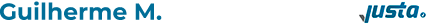
<style>
.page{position:relative;width:429px;height:24px;background:#ffffff}
.page>*{position:absolute;margin:0}
.t1{font:23.3px "Montserrat-Bold";color:#006e98}
</style>
<div class="page">
<p class="t1" style="left:0px;top:1px;width:162px;height:19px">Guilherme M.</p>
</div>
